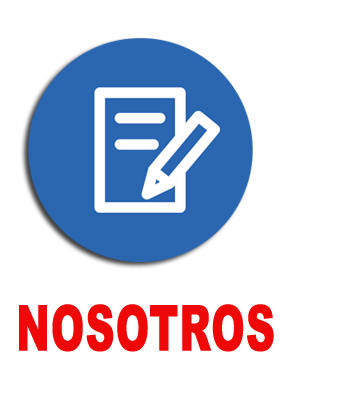
<style>
.page{position:relative;width:350px;height:416px;background:#ffffff}
.page>*{position:absolute;margin:0}
.t1{font:63.5px "Arial-Black";letter-spacing:0.02em;color:#ee0808;scale:0.64 1}
</style>
<div class="page">
<p class="t1" style="left:19px;top:304px;width:255px;height:48px">NOSOTROS</p>
</div>
